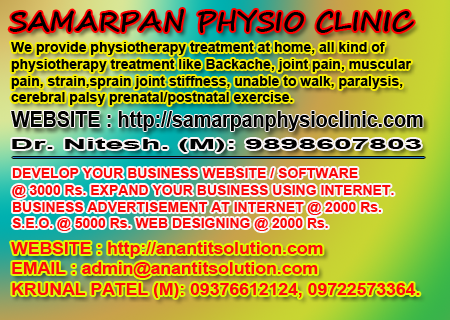
<style>
.page{position:relative;width:450px;height:320px}
.page>*{position:absolute;margin:0}
.t1{font:26.8px "SegoeScript-Bold";color:#000000}
.t2{font:14px "Arial-BoldMT";color:#000000}
.t3{font:21.9px "Arial-BoldMT";color:#000000;scale:0.89 1}
.t4{font:14px "Arial-BoldMT";color:#000000;scale:2.27 1}
.t5{font:14px "Arial-BoldMT";color:#fb0808}
.t6{font:16.9px "Arial-BoldMT";color:#ff080e;scale:1.04 1}
</style>
<div class="page">
<p class="t1" style="left:9px;top:9px;width:405px;height:24px">SAMARPAN PHYSIO CLINIC</p>
<p class="t2" style="left:11px;top:42px;width:400px;height:63px">We provide physiotherapy treatment at home, all kind of <br>physiotherapy treatment like Backache, joint pain, muscular<br>pain, strain,sprain joint stiffness, unable to walk, paralysis,<br>cerebral palsy prenatal/postnatal exercise.</p>
<p class="t3" style="left:11px;top:111px;width:412px;height:20px">WEBSITE : http://samarpanphysioclinic.com</p>
<p class="t4" style="left:12px;top:139px;width:409px;height:13px">Dr. Nitesh. (M): 9898607803</p>
<p class="t5" style="left:12px;top:168px;width:382px;height:63px">DEVELOP YOUR BUSINESS WEBSITE / SOFTWARE <br>@ 3000 Rs. EXPAND YOUR BUSINESS USING INTERNET.<br>BUSINESS ADVERTISEMENT AT INTERNET @ 2000 Rs.<br>S.E.O. @ 5000 Rs. WEB DESIGNING @ 2000 Rs.</p>
<p class="t6" style="left:11px;top:242px;width:409px;height:56px">WEBSITE : http://anantitsolution.com<br>EMAIL : admin@anantitsolution.com<br>KRUNAL PATEL (M): 09376612124, 09722573364.</p>
</div>
